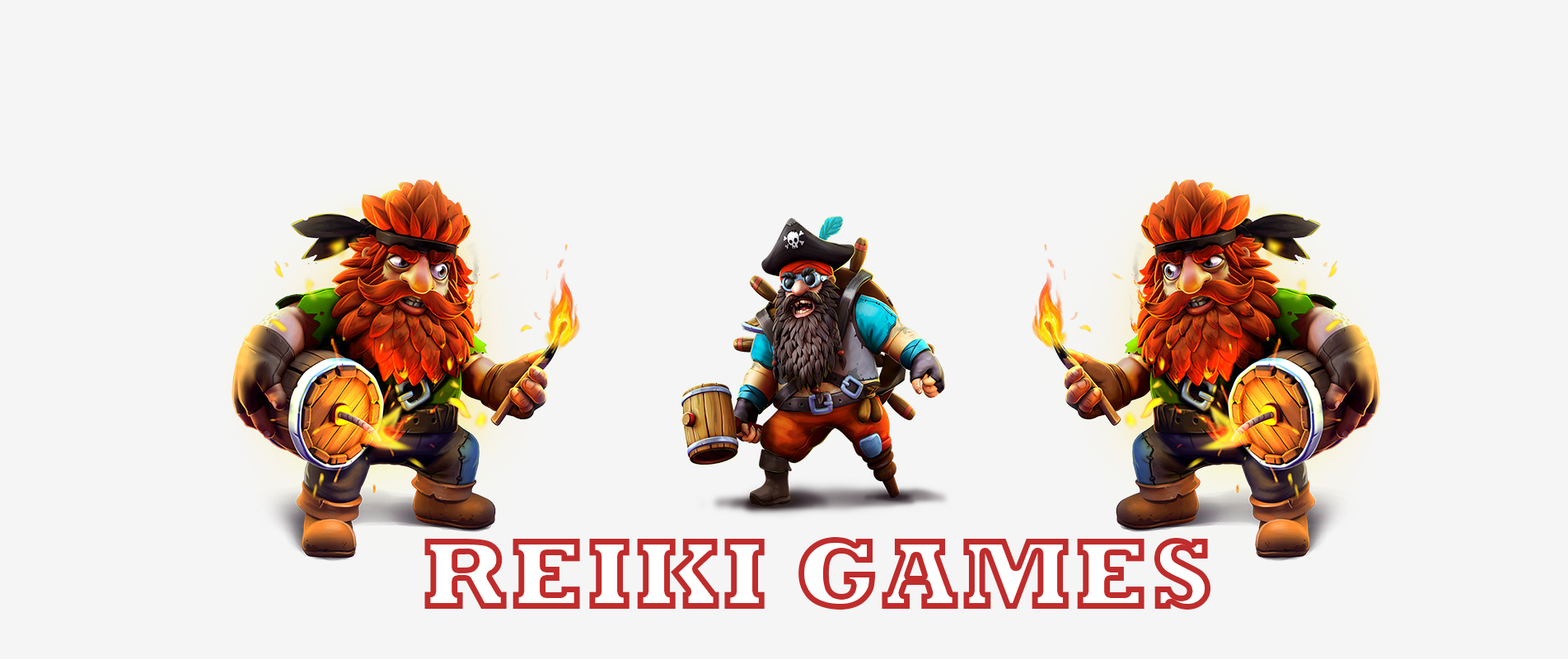
<style>
.page{position:relative;width:1568px;height:659px;background:#f5f5f5}
.page>*{position:absolute;margin:0}
.t1{font:103px "Rockwell-ExtraBold"}
</style>
<div class="page">
<p class="t1" style="left:424px;top:537px;width:787px;height:73px">REIKI GAMES</p>
</div>
